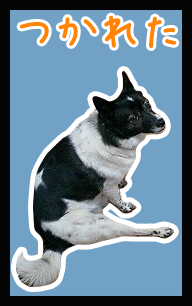
<style>
.page{position:relative;width:192px;height:306px;background:#71a1c5}
.page>*{position:absolute;margin:0}
.t1{font:53.2px "APJapanesefont";color:#ff8400}
</style>
<div class="page">
<p class="t1" style="left:19px;top:15px;width:158px;height:33px">つかれた</p>
</div>
